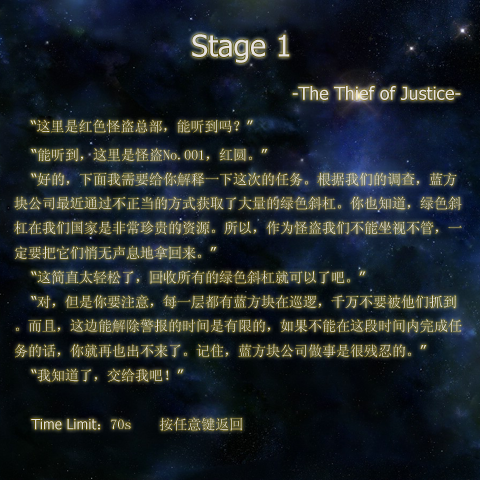
<style>
.page{position:relative;width:480px;height:480px}
.page>*{position:absolute;margin:0}
.t1{font:14px "SimSun";color:#e4e1e1}
.t2{font:24px "Tahoma";color:#e4e1e1}
.t3{font:30px "Tahoma";color:#e4e1e1}
.t4{font:18px "Tahoma";color:#e4e1e1}
.t5{font:14px "Tahoma";color:#e4e1e1}
</style>
<div class="page">
<p class="t1" style="left:14px;top:34px;width:448px;height:397px"><span class="t2"><br></span><span class="t3">Stage 1<br></span><span class="t4">                                                -The Thief of Justice-<br>   </span><span class="t5">“</span>这里是红色怪盗总部，能听到吗？<span class="t5">”<br>    “</span>能听到，这里是怪盗No.001，红圆。<span class="t5">”<br>    “</span>好的，下面我需要给你解释一下这次的任务。根据我们的调查，蓝方块公司最近通过不正当的方式获取了大量的绿色斜杠。你也知道，绿色斜杠在我们国家是非常珍贵的资源。所以，作为怪盗我们不能坐视不管，一定要把它们悄无声息地拿回来。<span class="t5">”<br>    “</span>这简直太轻松了，回收所有的绿色斜杠就可以了吧。<span class="t5">”<br>    “</span>对，但是你要注意，每一层都有蓝方块在巡逻，千万不要被他们抓到。而且，这边能解除警报的时间是有限的，如果不能在这段时间内完成任务的话，你就再也出不来了。记住，蓝方块公司做事是很残忍的。<span class="t5">”<br>    “</span>我知道了，交给我吧！<span class="t5">”<br><br>    Time Limit</span>：70s    按任意键返回</p>
</div>
